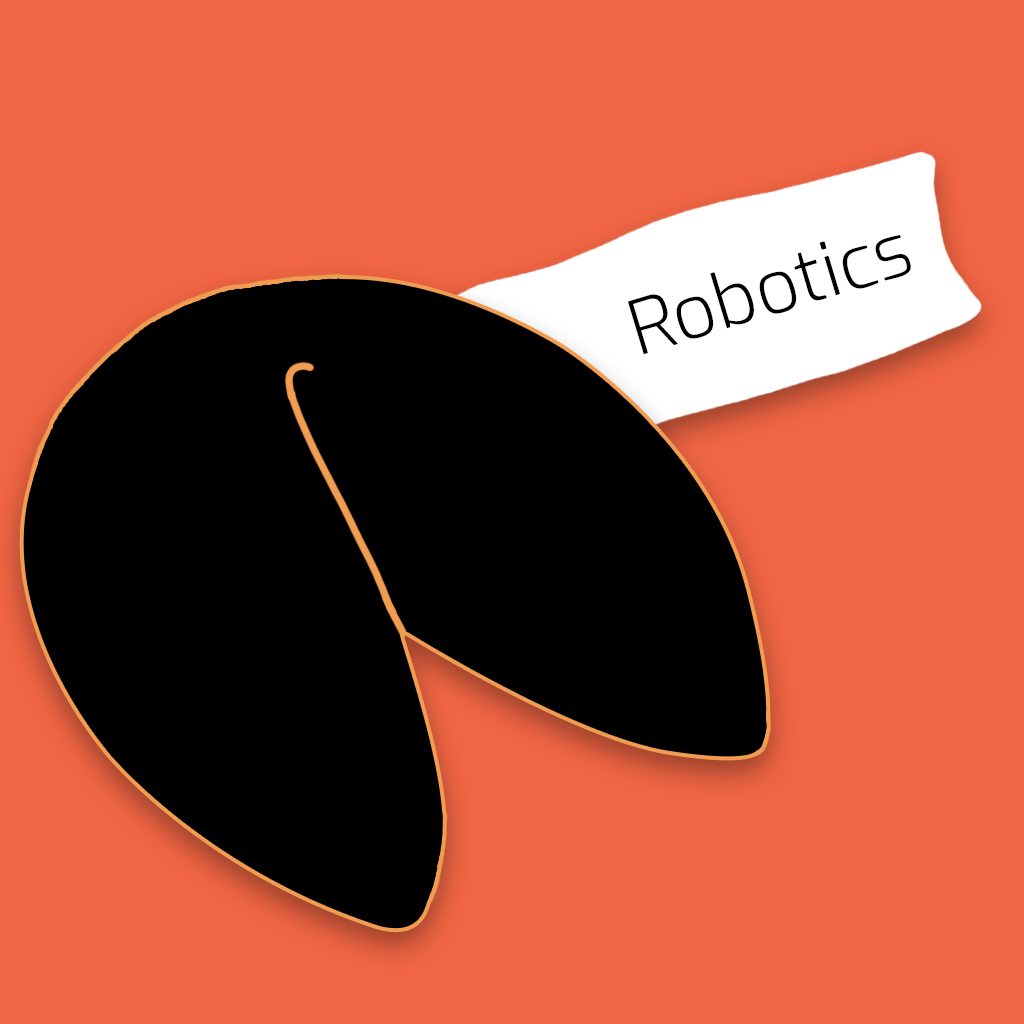
<style>
.page{position:relative;width:1024px;height:1024px;background:#f06543}
.page>*{position:absolute;margin:0}
.t1{font:75px "Exo-Light";color:#000000}
</style>
<div class="page">
<p class="t1" style="left:628px;top:235px;width:283px;height:120px;rotate:-17deg">Robotics</p>
</div>
